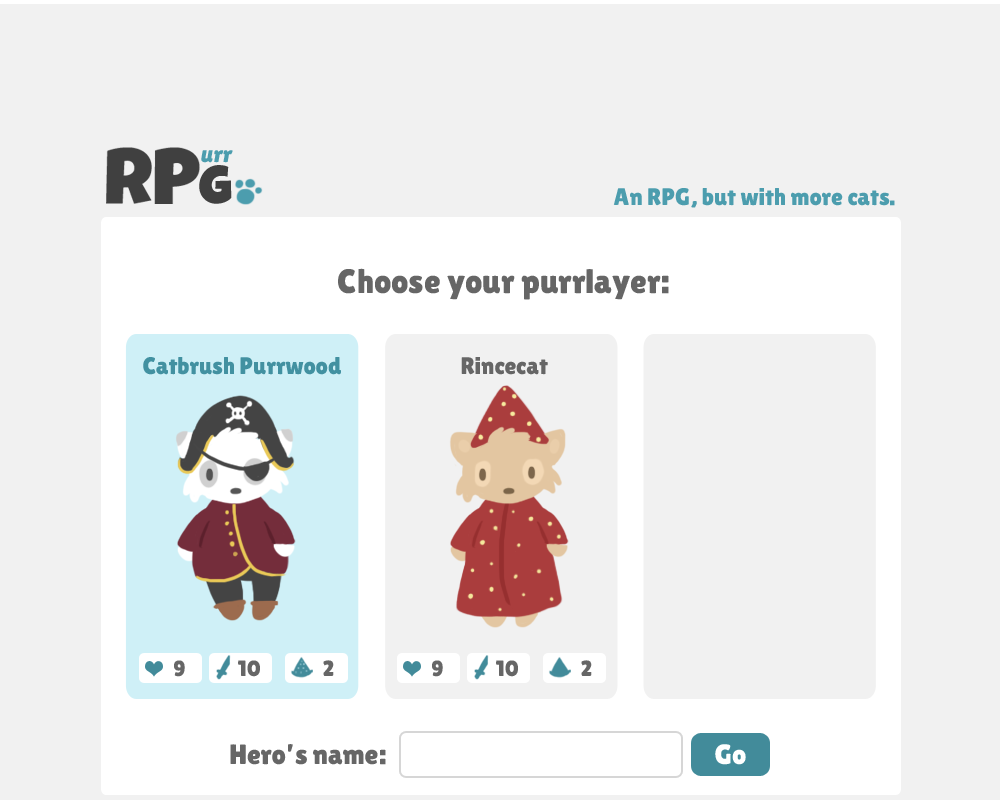
<style>
.page{position:relative;width:1000px;height:800px;background:#f1f1f1}
.page>*{position:absolute;margin:0}
.t1{font:23.1px "LilitaOne";color:#4c9dae;font-style:italic}
.t2{font:52.6px "LuckiestGuy-Regular";color:#2e2e2e}
.t3{font:24px "LilitaOne";color:#4c9dae}
.t4{font:34px "LilitaOne";color:#666666}
.t5{font:24px "LilitaOne";color:#4291a1}
.t6{font:24px "LilitaOne";color:#666666}
.t7{font:22px "LilitaOne";color:#666666}
.t8{font:28px "LilitaOne";color:#666666}
.t9{font:28px "LilitaOne";color:#ffffff}
</style>
<div class="page">
<p class="t1" style="left:201px;top:150px;width:32px;height:13px">urr</p>
<p class="t2" style="left:199px;top:165px;width:33px;height:39px">G</p>
<p class="t3" style="left:613px;top:188px;width:282px;height:20px">An RPG, but with more cats.</p>
<p class="t4" style="left:338px;top:268px;width:331px;height:32px">Choose your purrlayer:</p>
<p class="t5" style="left:143px;top:357px;width:198px;height:18px">Catbrush Purrwood</p>
<p class="t6" style="left:461px;top:357px;width:87px;height:18px">Rincecat</p>
<p class="t7" style="left:174px;top:660px;width:11px;height:17px">9</p>
<p class="t7" style="left:238px;top:660px;width:22px;height:17px">10</p>
<p class="t7" style="left:323px;top:660px;width:11px;height:16px">2</p>
<p class="t7" style="left:432px;top:660px;width:11px;height:17px">9</p>
<p class="t7" style="left:496px;top:660px;width:22px;height:17px">10</p>
<p class="t7" style="left:581px;top:660px;width:11px;height:16px">2</p>
<p class="t8" style="left:230px;top:744px;width:156px;height:21px">Hero’s name:</p>
<p class="t9" style="left:715px;top:744px;width:31px;height:21px">Go</p>
</div>
